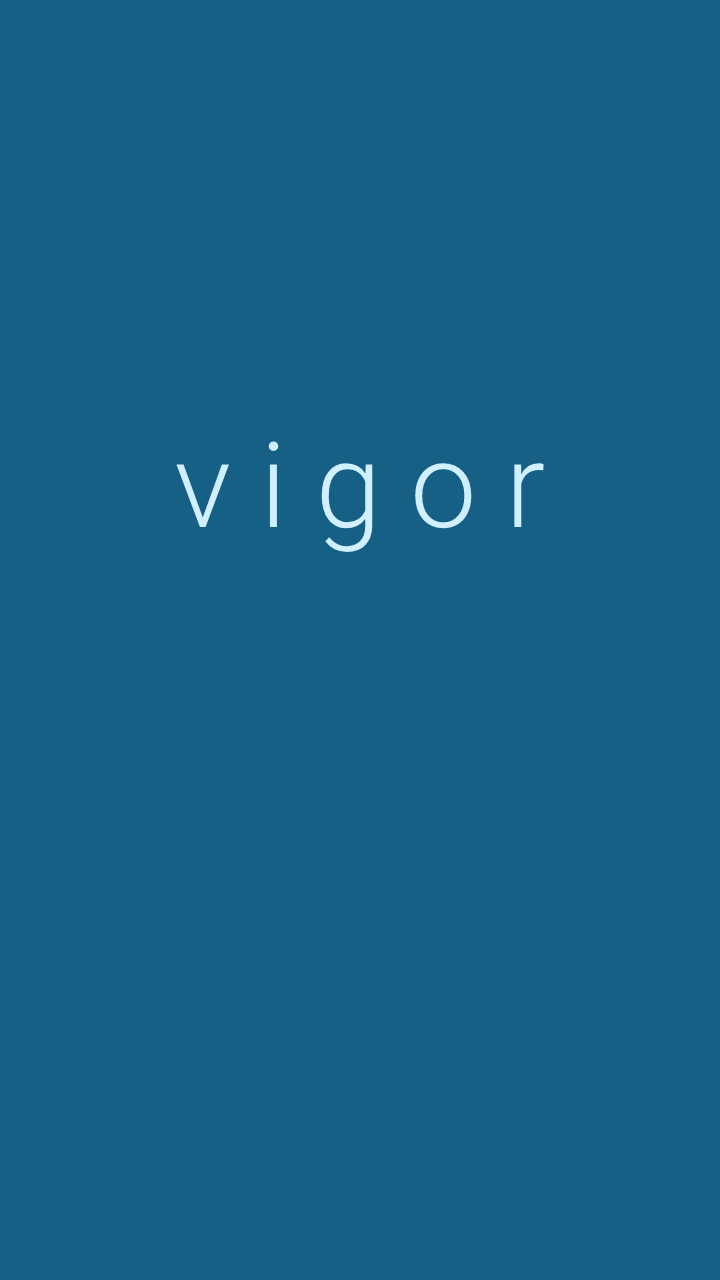
<style>
.page{position:relative;width:720px;height:1280px;background:#166086}
.page>*{position:absolute;margin:0}
.t1{font:118.6px "Roboto-Light";color:#d0efff}
</style>
<div class="page">
<p class="t1" style="left:176px;top:441px;width:368px;height:112px">v i g o r</p>
</div>
